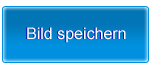
<style>
.page{position:relative;width:150px;height:70px}
.page>*{position:absolute;margin:0}
.t1{font:16px "ArialMT"}
.t2{font:16px "ArialMT";color:#ffffff}
</style>
<div class="page">
<p class="t1" style="left:26px;top:27px;width:99px;height:16px">Bild speichern</p>
<p class="t2" style="left:27px;top:27px;width:99px;height:16px">Bild speichern</p>
</div>
